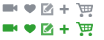
<style>
.page{position:relative;width:104px;height:40px;background:#ffffff}
.page>*{position:absolute;margin:0}
.t1{font:18px "Terminal";color:#888d95}
.t2{font:18px "Terminal";color:#2ea033}
</style>
<div class="page">
<p class="t1" style="left:59px;top:4px;width:10px;height:10px">+</p>
<p class="t2" style="left:59px;top:24px;width:10px;height:10px">+</p>
</div>
